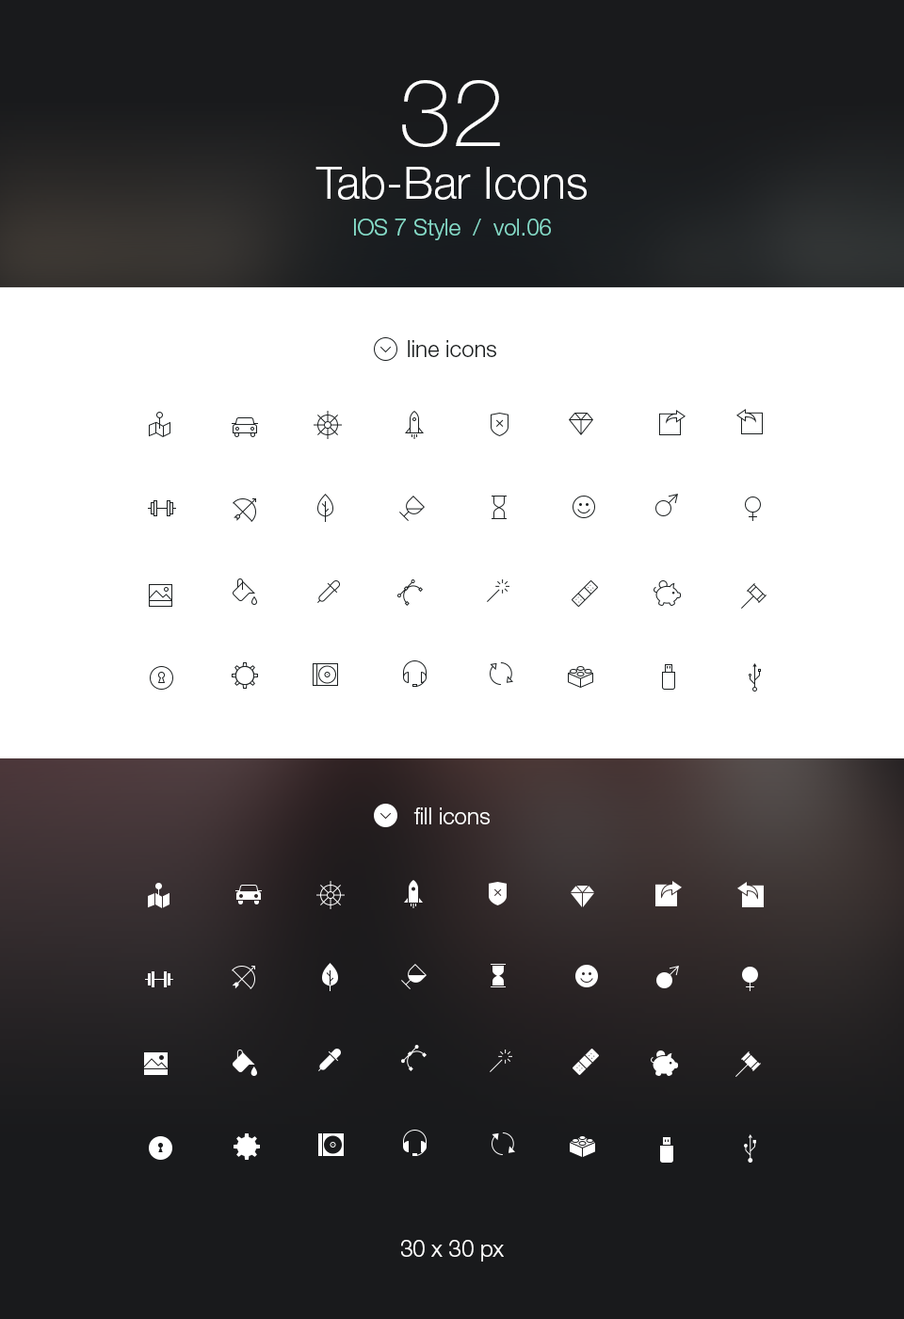
<style>
.page{position:relative;width:904px;height:1319px;background:#ffffff}
.page>*{position:absolute;margin:0}
.t1{font:22.6px/36.7px "HelveticaNeueLTStd-Lt";color:#85dac7}
.t2{font:94.2px/47.1px "HelveticaNeueLTStd-Th";color:#ffffff}
.t3{font:45.2px/52.7px "HelveticaNeueLTStd-Lt";color:#ffffff}
.t4{font:22.6px "HelveticaNeueLTStd-Lt";color:#1c2021}
.t5{font:22.6px "HelveticaNeueLTStd-Lt";color:#ffffff}
</style>
<div class="page">
<p class="t1" style="left:316px;top:80px;width:271px;height:160px;text-align:center"><span class="t2">32<br></span><span class="t3">Tab-Bar Icons<br></span>IOS 7 Style  /  vol.06</p>
<p class="t4" style="left:408px;top:340px;width:88px;height:17px">line icons</p>
<p class="t5" style="left:414px;top:807px;width:76px;height:17px">fill icons</p>
<p class="t5" style="left:401px;top:1240px;width:103px;height:21px">30 x 30 px</p>
</div>
